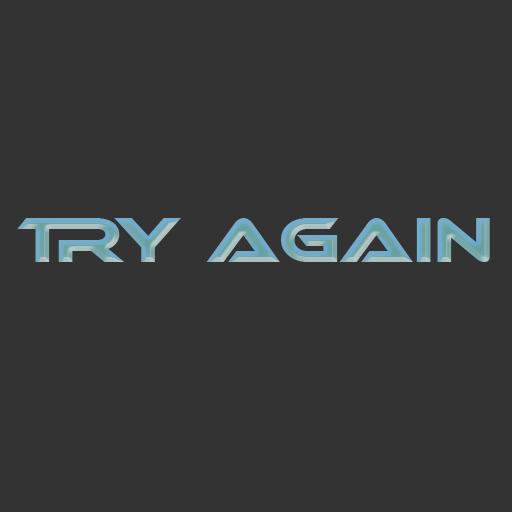
<style>
.page{position:relative;width:512px;height:512px;background:#333333}
.page>*{position:absolute;margin:0}
.t1{font:61.4px "Ethnocentric"}
</style>
<div class="page">
<p class="t1" style="left:17px;top:218px;width:473px;height:44px">Try Again</p>
</div>
